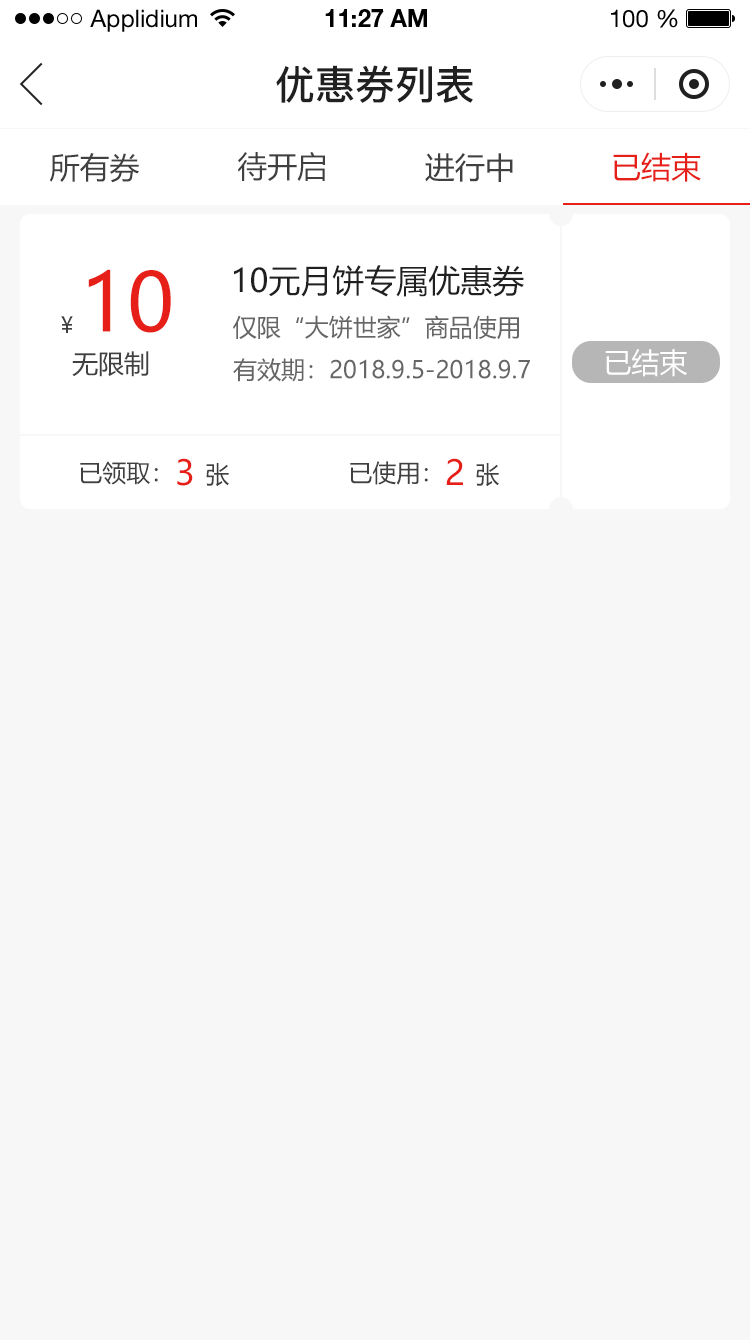
<style>
.page{position:relative;width:750px;height:1340px;background:#f7f7f7}
.page>*{position:absolute;margin:0}
.t1{font:24px "HelveticaNeueLTStd-Roman";color:#000000}
.t2{font:24px "HelveticaNeueLTStd-Bd";color:#000000}
.t3{font:40px "PingFang-SC-Bold";color:#202020;text-transform:uppercase}
.t4{font:30px "MicrosoftYaHei";color:#404040;text-transform:uppercase}
.t5{font:30px "MicrosoftYaHei";color:#e61f18;text-transform:uppercase}
.t6{font:80px "MicrosoftYaHei";color:#e61f18;text-transform:uppercase}
.t7{font:32px "MicrosoftYaHei";color:#202020;text-transform:uppercase}
.t8{font:22px "MicrosoftYaHei";color:#404040;text-transform:uppercase}
.t9{font:24px "MicrosoftYaHei";color:#666666;text-transform:uppercase}
.t10{font:26px "MicrosoftYaHei";color:#404040;text-transform:uppercase}
.t11{font:28px "MicrosoftYaHei";color:#ffffff;text-transform:uppercase}
.t12{font:24px "MicrosoftYaHei";color:#404040;text-transform:uppercase}
.t13{font:34px "MicrosoftYaHei";color:#e61f18;text-transform:uppercase}
</style>
<div class="page">
<p class="t1" style="left:90px;top:9px;width:107px;height:23px">Applidium</p>
<p class="t2" style="left:325px;top:9px;width:102px;height:18px">11:27 AM</p>
<p class="t1" style="left:611px;top:9px;width:67px;height:19px">100 %</p>
<p class="t3" style="left:276px;top:65px;width:197px;height:38px">优惠券列表</p>
<p class="t4" style="left:49px;top:153px;width:90px;height:30px">所有券</p>
<p class="t4" style="left:237px;top:151px;width:88px;height:30px">待开启</p>
<p class="t4" style="left:425px;top:153px;width:88px;height:29px">进行中</p>
<p class="t5" style="left:613px;top:152px;width:88px;height:30px">已结束</p>
<p class="t6" style="left:88px;top:269px;width:83px;height:64px">10</p>
<p class="t7" style="left:234px;top:265px;width:290px;height:32px">10元月饼专属优惠券</p>
<p class="t8" style="left:61px;top:316px;width:12px;height:17px">¥</p>
<p class="t9" style="left:233px;top:315px;width:286px;height:25px">仅限“大饼世家”商品使用</p>
<p class="t10" style="left:72px;top:351px;width:77px;height:26px">无限制</p>
<p class="t11" style="left:605px;top:349px;width:82px;height:28px">已结束</p>
<p class="t9" style="left:233px;top:358px;width:297px;height:24px">有效期：2018.9.5-2018.9.7</p>
<p class="t12" style="left:80px;top:461px;width:78px;height:24px">已领取：</p>
<p class="t13" style="left:177px;top:458px;width:16px;height:28px">3</p>
<p class="t12" style="left:350px;top:461px;width:78px;height:24px">已使用：</p>
<p class="t13" style="left:446px;top:458px;width:17px;height:27px">2</p>
<p class="t12" style="left:206px;top:463px;width:23px;height:24px">张</p>
<p class="t12" style="left:476px;top:463px;width:23px;height:24px">张</p>
</div>
